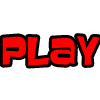
<style>
.page{position:relative;width:100px;height:100px;background:#ffffff}
.page>*{position:absolute;margin:0}
.t1{font:34px "Baveuse";color:#ff0000}
</style>
<div class="page">
<p class="t1" style="left:2px;top:36px;width:98px;height:30px">Play</p>
</div>
